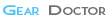
<style>
.page{position:relative;width:108px;height:21px;background:#ffffff}
.page>*{position:absolute;margin:0}
.t1{font:9.7px "ADAM.CGPRO";letter-spacing:-0.008em;color:#71726f;scale:1.29 1}
.t2{font:13.9px "AzonixRegular";letter-spacing:-0.008em;color:#4fc5f6;scale:1.29 1}
.t3{font:9.7px "ADAM.CGPRO";letter-spacing:-0.008em;color:#4fc5f6;scale:1.29 1}
.t4{font:13.9px "AzonixRegular";letter-spacing:-0.008em;color:#71726f;scale:1.29 1}
</style>
<div class="page">
<p class="t1" style="left:3px;top:5px;width:103px;height:10px"><span class="t2">G</span><span class="t3">EAR </span><span class="t4">D</span>OCTOR</p>
</div>
